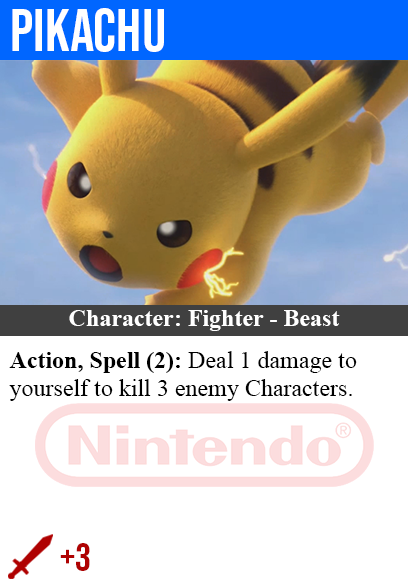
<style>
.page{position:relative;width:408px;height:585px;background:#ffffff}
.page>*{position:absolute;margin:0}
.t1{font:60px "BebasNeue-Regular";color:#ffffff}
.t2{font:24px "TimesNewRomanPS-BoldMT";color:#ffffff}
.t3{font:24px "TimesNewRomanPSMT";color:#000000}
.t4{font:24px "TimesNewRomanPS-BoldMT";color:#000000}
.t5{font:40px "BebasNeue-Regular";color:#af0202}
</style>
<div class="page">
<p class="t1" style="left:12px;top:8px;width:152px;height:44px">pikachu</p>
<p class="t2" style="left:69px;top:310px;width:271px;height:21px">Character: Fighter - Beast</p>
<p class="t3" style="left:9px;top:351px;width:348px;height:50px"><span class="t4">Action, Spell (2):</span> Deal 1 damage to<br>yourself to kill 3 enemy Characters.</p>
<p class="t5" style="left:60px;top:543px;width:30px;height:28px">+3</p>
</div>
